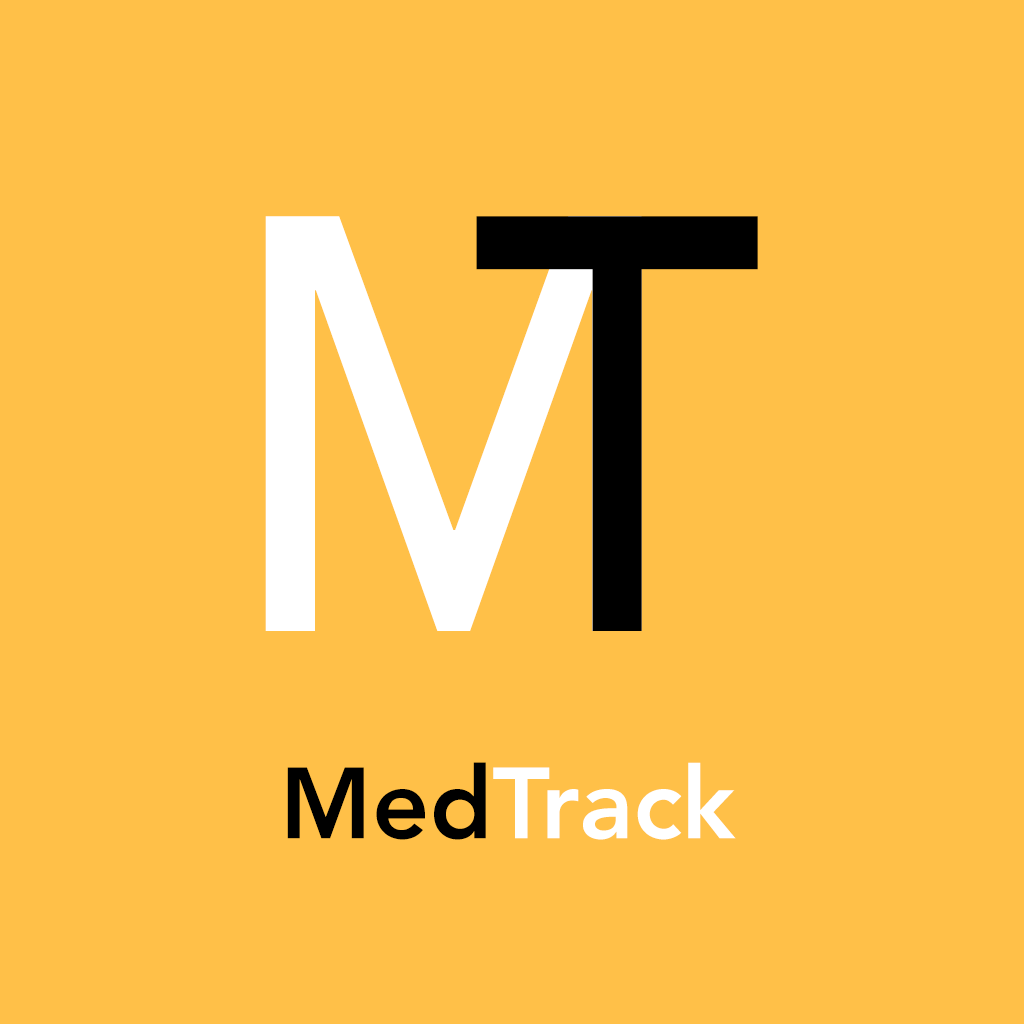
<style>
.page{position:relative;width:1024px;height:1024px;background:#ffc048}
.page>*{position:absolute;margin:0}
.t1{font:585.4px "Avenir-Medium";color:#ffffff;scale:0.87 1}
.t2{font:585.4px "Avenir-Medium";color:#000000;scale:0.87 1}
.t3{font:100px "Avenir-Heavy";color:#ffffff}
.t4{font:100px "Avenir-Heavy";color:#000000}
</style>
<div class="page">
<p class="t1" style="left:265px;top:216px;width:377px;height:415px">M</p>
<p class="t2" style="left:476px;top:216px;width:282px;height:415px">T</p>
<p class="t3" style="left:287px;top:762px;width:449px;height:78px"><span class="t4">Med</span>Track</p>
</div>
